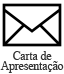
<style>
.page{position:relative;width:64px;height:74px;background:#ffffff}
.page>*{position:absolute;margin:0}
.t1{font:11.5px/10px "TimesNewRomanPSMT";color:#333333}
</style>
<div class="page">
<p class="t1" style="left:0px;top:51px;width:64px;height:22px;text-align:center">Carta de<br>Apresentação</p>
</div>
